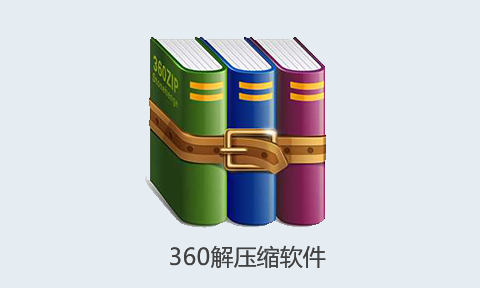
<style>
.page{position:relative;width:480px;height:288px;background:#e6edf2}
.page>*{position:absolute;margin:0}
.t1{font:23px "MicrosoftYaHei";color:#414141}
</style>
<div class="page">
<p class="t1" style="left:170px;top:245px;width:156px;height:24px">360解压缩软件</p>
</div>
